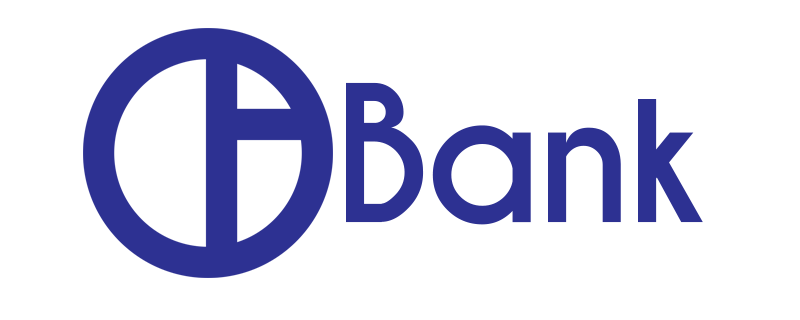
<style>
.page{position:relative;width:800px;height:320px;background:#ffffff}
.page>*{position:absolute;margin:0}
.t1{font:178.2px "CaviarDreams-Bold";letter-spacing:-0.05em;color:#2d3192}
</style>
<div class="page">
<p class="t1" style="left:346px;top:82px;width:357px;height:143px">Bank</p>
</div>
